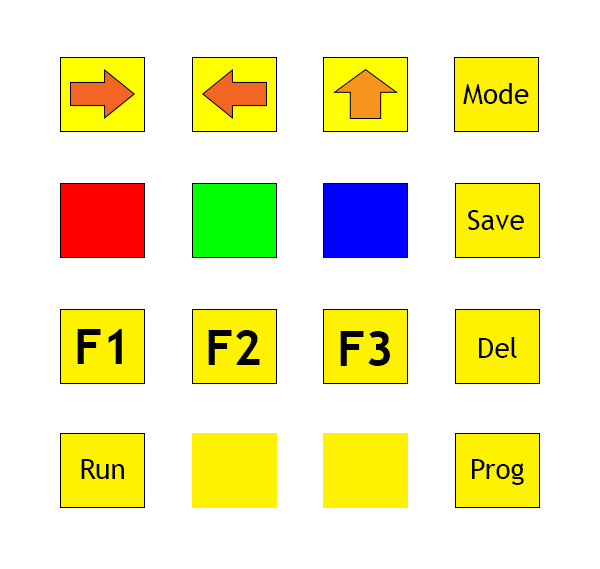
<style>
.page{position:relative;width:600px;height:569px;background:#ffffff}
.page>*{position:absolute;margin:0}
.t1{font:28.2px "TrebuchetMS";color:#000003}
.t2{font:49.4px "TrebuchetMS-Bold";color:#000003}
</style>
<div class="page">
<p class="t1" style="left:463px;top:83px;width:66px;height:21px">Mode</p>
<p class="t1" style="left:468px;top:210px;width:56px;height:20px">Save</p>
<p class="t2" style="left:77px;top:329px;width:45px;height:35px">F1</p>
<p class="t2" style="left:208px;top:330px;width:52px;height:35px">F2</p>
<p class="t2" style="left:340px;top:331px;width:50px;height:35px">F3</p>
<p class="t1" style="left:479px;top:337px;width:38px;height:21px">Del</p>
<p class="t1" style="left:81px;top:459px;width:43px;height:20px">Run</p>
<p class="t1" style="left:472px;top:459px;width:52px;height:26px">Prog</p>
</div>
